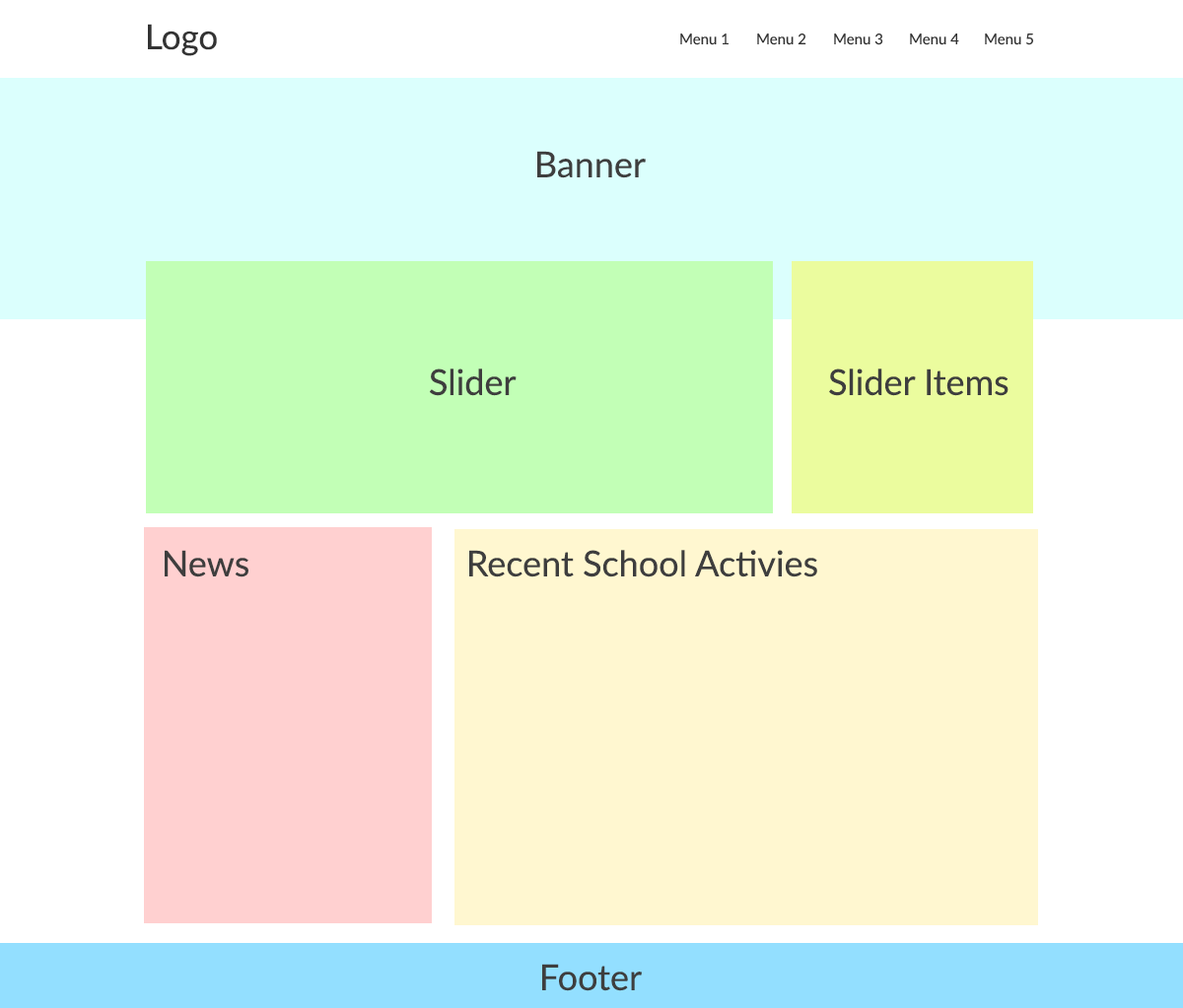
<style>
.page{position:relative;width:1183px;height:1008px;background:#ffffff}
.page>*{position:absolute;margin:0}
.t1{font:34.5px "Lato-Regular";color:#333333}
.t2{font:14.8px "Lato-Regular";color:#333333}
.t3{font:35.5px "Lato-Regular";color:#3e3e3e}
</style>
<div class="page">
<p class="t1" style="left:148px;top:24px;width:69px;height:32px">Logo</p>
<p class="t2" style="left:680px;top:34px;width:48px;height:11px">Menu 1</p>
<p class="t2" style="left:757px;top:34px;width:49px;height:11px">Menu 2</p>
<p class="t2" style="left:834px;top:34px;width:49px;height:11px">Menu 3</p>
<p class="t2" style="left:910px;top:34px;width:49px;height:11px">Menu 4</p>
<p class="t2" style="left:985px;top:34px;width:48px;height:11px">Menu 5</p>
<p class="t3" style="left:537px;top:151px;width:109px;height:27px">Banner</p>
<p class="t3" style="left:430px;top:369px;width:86px;height:27px">Slider</p>
<p class="t3" style="left:829px;top:369px;width:179px;height:27px">Slider Items</p>
<p class="t3" style="left:165px;top:550px;width:83px;height:28px">News</p>
<p class="t3" style="left:469px;top:550px;width:348px;height:28px">Recent School Activies</p>
<p class="t3" style="left:542px;top:964px;width:100px;height:27px">Footer</p>
</div>
